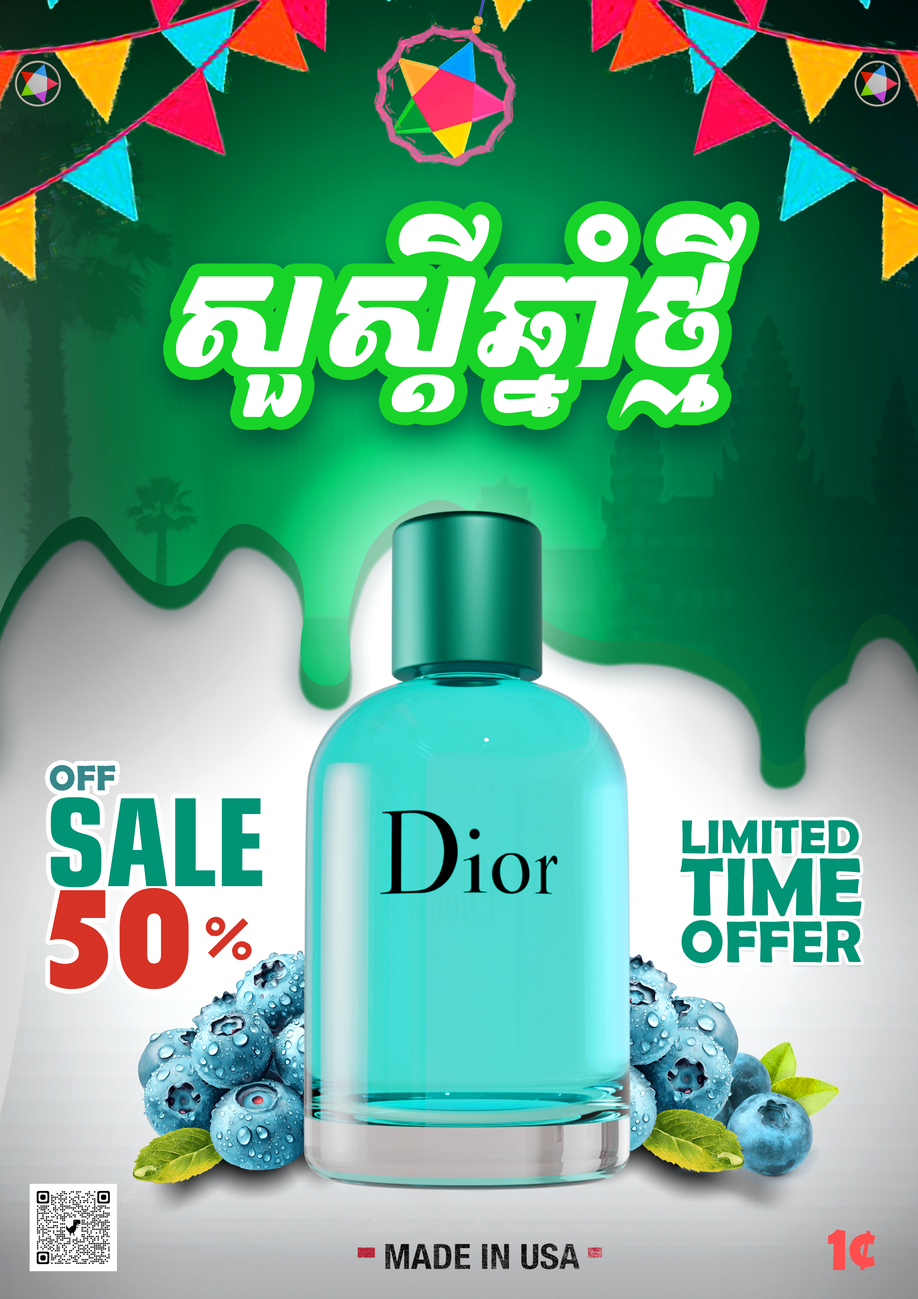
<style>
.page{position:relative;width:918px;height:1299px}
.page>*{position:absolute;margin:0}
.t1{font:142.4px "Kh-Ang-ChittBous";color:#ffffff}
.t2{font:35.5px "BerlinSansFBDemi-Bold";color:#38878a}
.t3{font:120.9px "KhAngFridaySolo";color:#009376}
.t4{font:47.9px "BerlinSansFBDemi-Bold";color:#009376}
.t5{font:83px "BerlinSansFBDemi-Bold";color:#009376}
.t6{font:144.9px "Bauhaus93";letter-spacing:-0.05em;color:#d63226}
.t7{font:131px "ABCTEXTFIVE";letter-spacing:-0.05em;color:#d63226}
.t8{font:59.1px "BerlinSansFBDemi-Bold";color:#009376}
.t9{font:65.8px "BerlinSansFBDemi-Bold";color:#ff4e4e}
</style>
<div class="page">
<p class="t1" style="left:176px;top:214px;width:571px;height:204px">សួស្តីឆ្នាំថ្មី</p>
<p class="t2" style="left:50px;top:765px;width:66px;height:25px">OFF</p>
<p class="t3" style="left:51px;top:797px;width:211px;height:90px">SALE</p>
<p class="t4" style="left:682px;top:820px;width:177px;height:33px">LIMITED</p>
<p class="t5" style="left:680px;top:858px;width:182px;height:58px">TIME</p>
<p class="t6" style="left:50px;top:888px;width:139px;height:101px">50</p>
<p class="t7" style="left:205px;top:917px;width:47px;height:43px">%</p>
<p class="t8" style="left:682px;top:920px;width:179px;height:43px">OFFER</p>
<p class="t9" style="left:828px;top:1229px;width:48px;height:41px">1¢</p>
</div>
